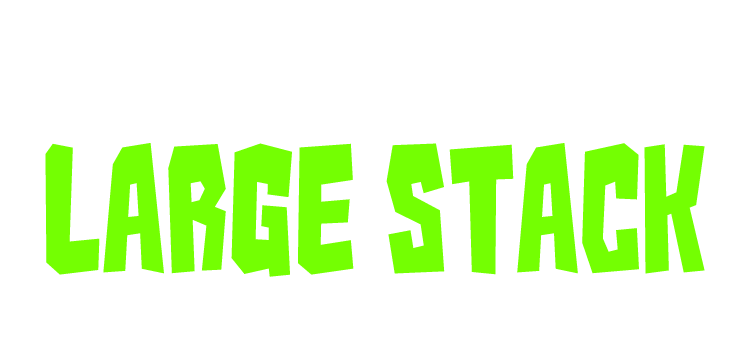
<style>
.page{position:relative;width:731px;height:356px;background:#ffffff}
.page>*{position:absolute;margin:0}
.t1{font:156.1px "Kaiju-Monster__G";color:#74ff02}
</style>
<div class="page">
<p class="t1" style="left:45px;top:143px;width:660px;height:134px">Large Stack</p>
</div>
